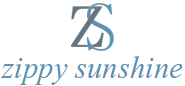
<style>
.page{position:relative;width:185px;height:86px;background:#ffffff}
.page>*{position:absolute;margin:0}
.t1{font:38.3px "Vijaya";color:#5f91b0}
</style>
<div class="page">
<p class="t1" style="left:1px;top:56px;width:182px;height:29px">zippy sunshine</p>
</div>
